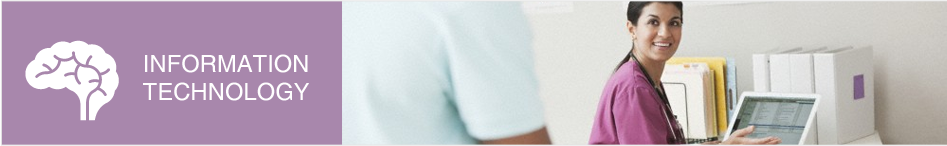
<style>
.page{position:relative;width:947px;height:146px;background:#a887ac}
.page>*{position:absolute;margin:0}
.t1{font:23.8px "Helvetica";color:#ffffff;text-transform:uppercase}
</style>
<div class="page">
<p class="t1" style="left:143px;top:54px;width:166px;height:47px">Information <br>Technology</p>
</div>
